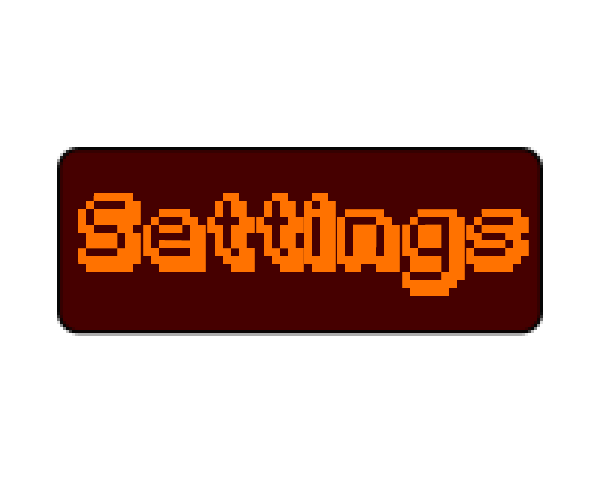
<style>
.page{position:relative;width:600px;height:480px;background:#ffffff}
.page>*{position:absolute;margin:0}
.t1{font:63.2px "Fipps-Regular";letter-spacing:0.02em;color:#ff7200}
</style>
<div class="page">
<p class="t1" style="left:78px;top:193px;width:451px;height:103px">Settings</p>
</div>
